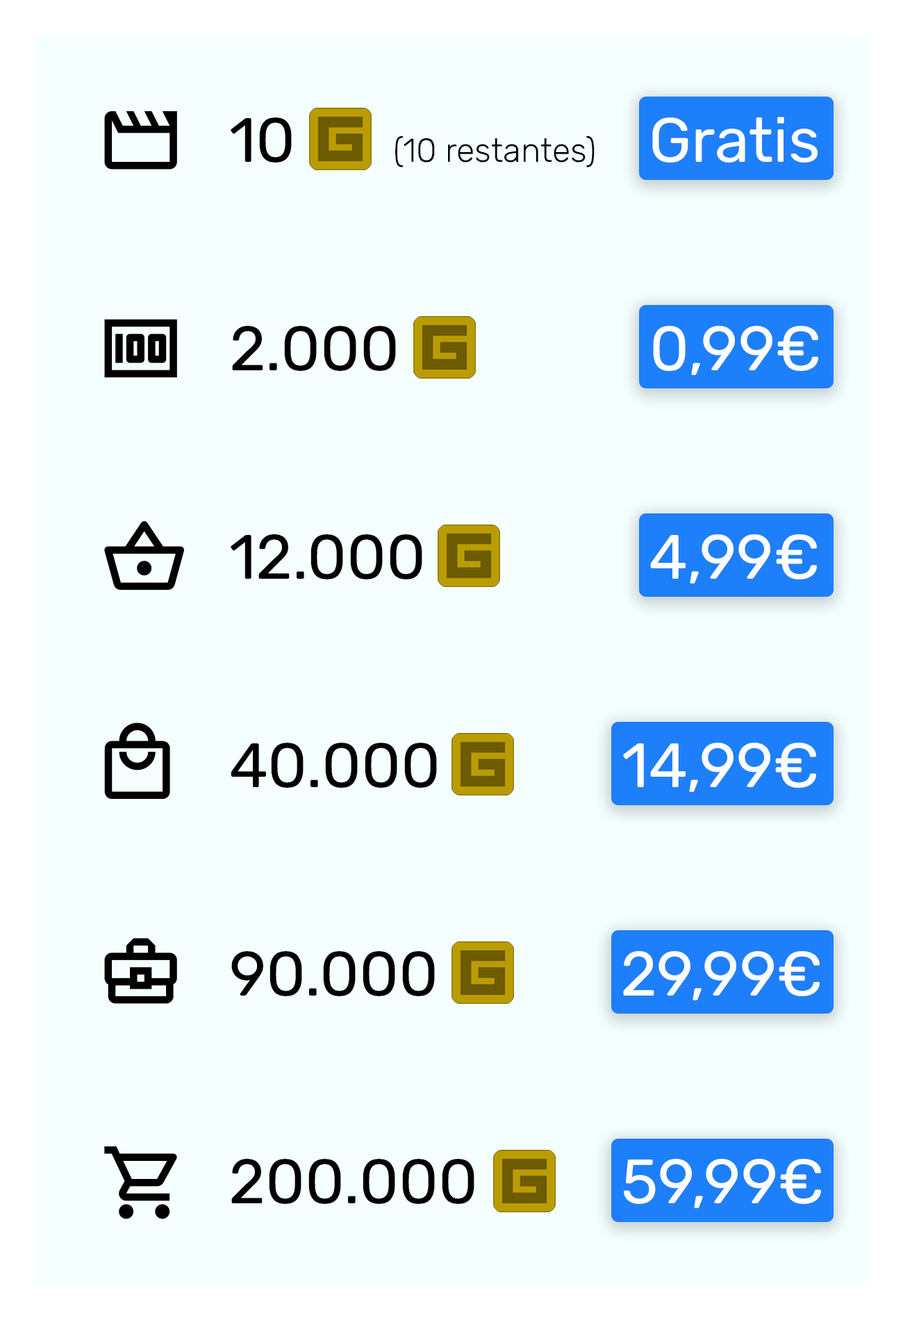
<style>
.page{position:relative;width:903px;height:1320px;background:#f5ffff}
.page>*{position:absolute;margin:0}
.t1{font:62.5px "Rubik-Regular";color:#000000}
.t2{font:62.5px "Rubik-Regular";color:#ffffff}
</style>
<div class="page">
<p class="t1" style="left:231px;top:534px;width:586px;height:50px">12.000                  <span class="t2">4,99€</span></p>
<p class="t1" style="left:231px;top:743px;width:585px;height:49px">40.000             <span class="t2">14,99€</span></p>
<p class="t1" style="left:231px;top:951px;width:589px;height:50px">90.000             <span class="t2">29,99€</span></p>
<p class="t1" style="left:231px;top:1159px;width:590px;height:49px">200.000         <span class="t2">59,99€</span></p>
</div>
